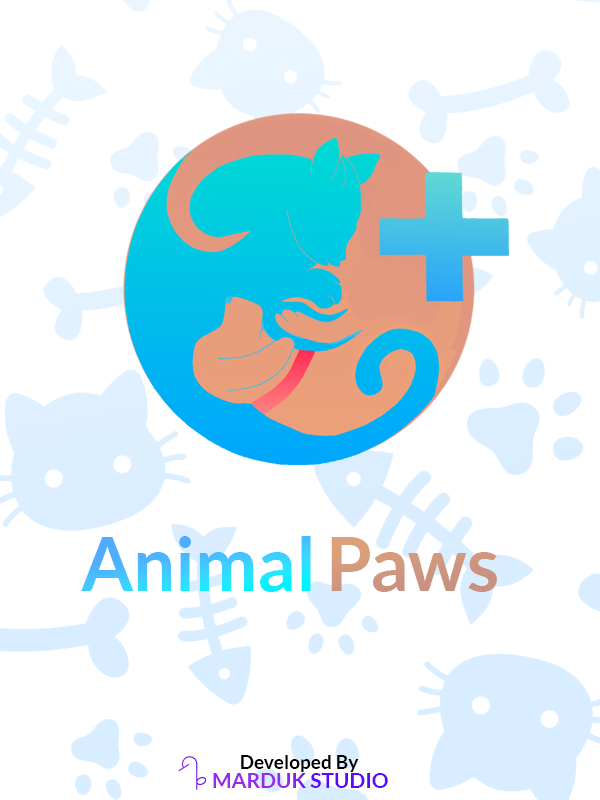
<style>
.page{position:relative;width:600px;height:800px;background:#ffffff}
.page>*{position:absolute;margin:0}
.t1{font:19.1px "Lato-Bold";color:#000000}
.t2{font:21.1px "Lato-Bold"}
</style>
<div class="page">
<p class="t1" style="left:241px;top:755px;width:118px;height:17px">Developed By</p>
<p class="t2" style="left:213px;top:773px;width:175px;height:15px">MARDUK STUDIO</p>
</div>
